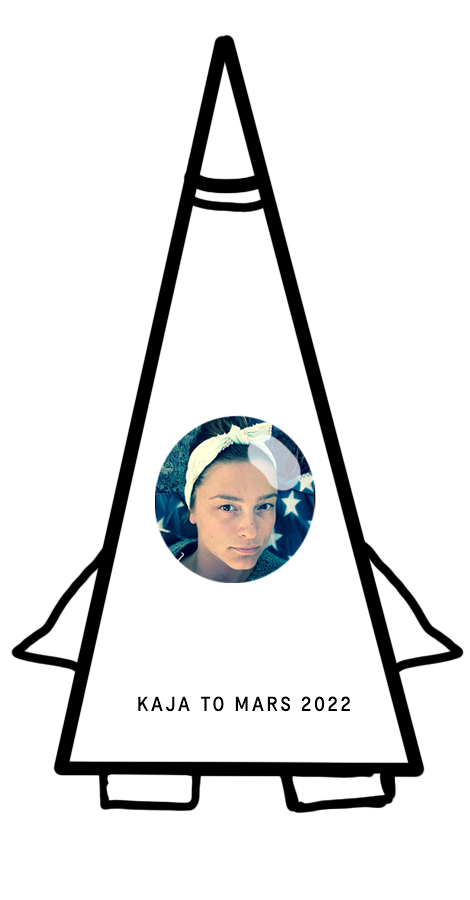
<style>
.page{position:relative;width:470px;height:900px;background:#ffffff}
.page>*{position:absolute;margin:0}
.t1{font:20px "TranscriptTrial-Regular";letter-spacing:0.14em;color:#000000}
</style>
<div class="page">
<p class="t1" style="left:138px;top:696px;width:212px;height:16px">KAJA TO MARS 2022</p>
</div>
